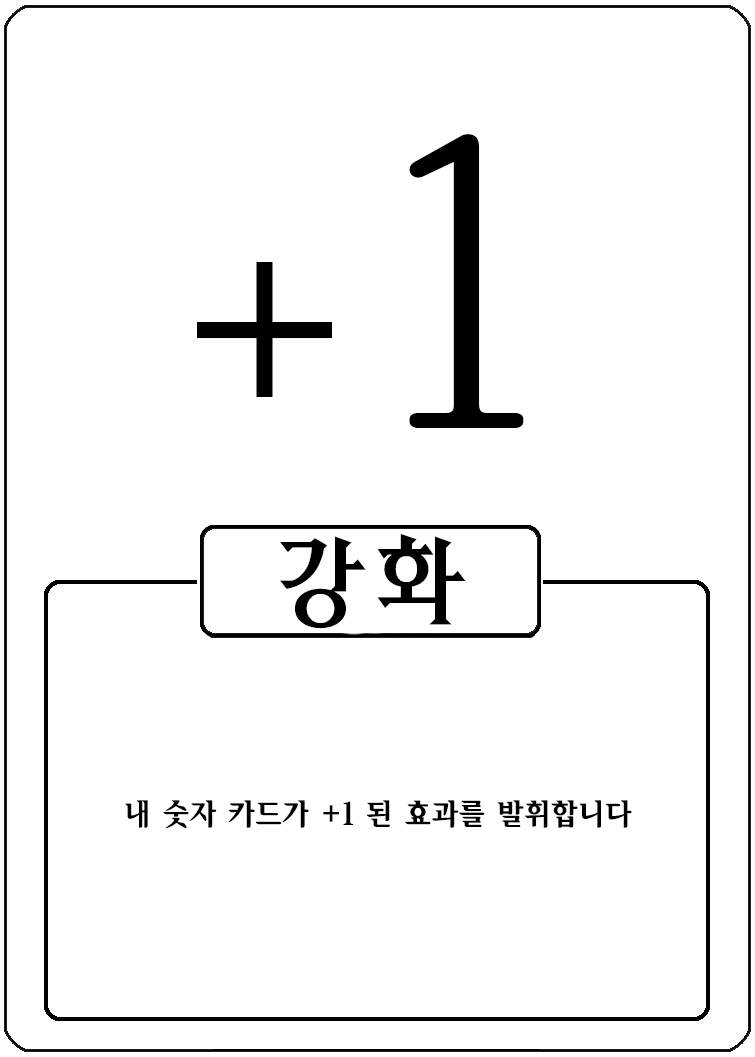
<style>
.page{position:relative;width:755px;height:1057px;background:#ffffff}
.page>*{position:absolute;margin:0}
.t1{font:300px "HCRBatang";color:#000000}
.t2{font:400px "HCRBatang";color:#000000}
.t3{font:100px "HYcysM";color:#000000}
.t4{font:30px "HaanSollipM";color:#000000}
</style>
<div class="page">
<p class="t1" style="left:197px;top:134px;width:327px;height:294px">+<span class="t2">1</span></p>
<p class="t3" style="left:280px;top:534px;width:186px;height:95px">강화</p>
<p class="t4" style="left:125px;top:800px;width:507px;height:28px">내 숫자 카드가 +1 된 효과를 발휘합니다</p>
</div>
